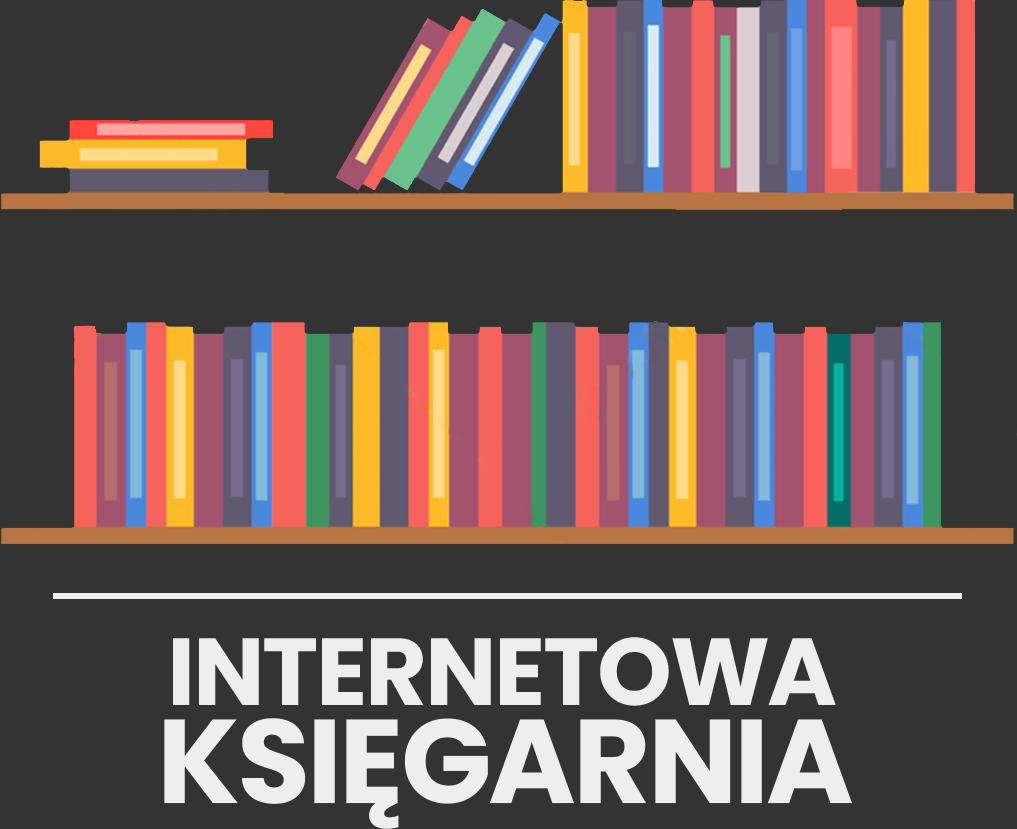
<style>
.page{position:relative;width:1017px;height:829px;background:#333333}
.page>*{position:absolute;margin:0}
.t1{font:95.2px "Poppins-Bold";letter-spacing:-0.025em;color:#eeeeee}
.t2{font:119px "Poppins-Bold";letter-spacing:-0.025em;color:#eeeeee}
</style>
<div class="page">
<p class="t1" style="left:173px;top:637px;width:663px;height:69px">INTERNETOWA</p>
<p class="t2" style="left:164px;top:718px;width:688px;height:111px">KSIĘGARNIA</p>
</div>
